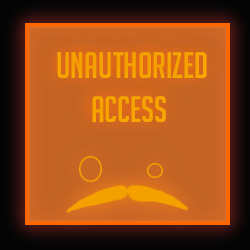
<style>
.page{position:relative;width:250px;height:250px}
.page>*{position:absolute;margin:0}
.t1{font:36px "BigNoodleTitling";color:#ffae00}
</style>
<div class="page">
<p class="t1" style="left:57px;top:52px;width:150px;height:70px">Unauthorized<br>      access</p>
</div>
